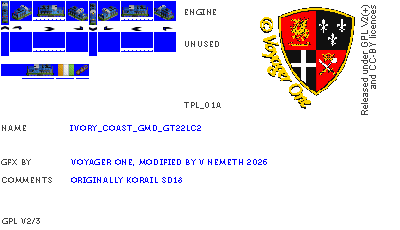
<style>
.page{position:relative;width:400px;height:230px;background:#ffffff}
.page>*{position:absolute;margin:0}
.t1{font:8px "Museo700-Regular";letter-spacing:0.075em;color:#404040;text-transform:uppercase}
.t2{font:8px "Museo700-Regular";letter-spacing:0.075em;color:#0000ff;text-transform:uppercase}
</style>
<div class="page">
<p class="t1" style="left:185px;top:9px;width:31px;height:6px">engine</p>
<p class="t1" style="left:185px;top:41px;width:34px;height:6px">unused</p>
<p class="t1" style="left:184px;top:102px;width:37px;height:7px">tpl_01a</p>
<p class="t1" style="left:2px;top:125px;width:24px;height:6px">name</p>
<p class="t2" style="left:70px;top:125px;width:131px;height:7px">Ivory_Coast_GMD_GT22LC2</p>
<p class="t1" style="left:1px;top:159px;width:30px;height:6px">gfx by</p>
<p class="t2" style="left:71px;top:159px;width:196px;height:7px">voyager one, modified by v nemeth 2026</p>
<p class="t1" style="left:2px;top:177px;width:50px;height:6px">comments</p>
<p class="t2" style="left:71px;top:177px;width:111px;height:6px">originally korail sd18</p>
<p class="t1" style="left:2px;top:218px;width:38px;height:6px">gpl v2/3</p>
</div>
